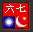
<style>
.page{position:relative;width:33px;height:32px;background:#f20000}
.page>*{position:absolute;margin:0}
.t1{font:10.4px "SimSun";color:#ffffff}
</style>
<div class="page">
<p class="t1" style="left:5px;top:4px;width:21px;height:9px">六七</p>
</div>
